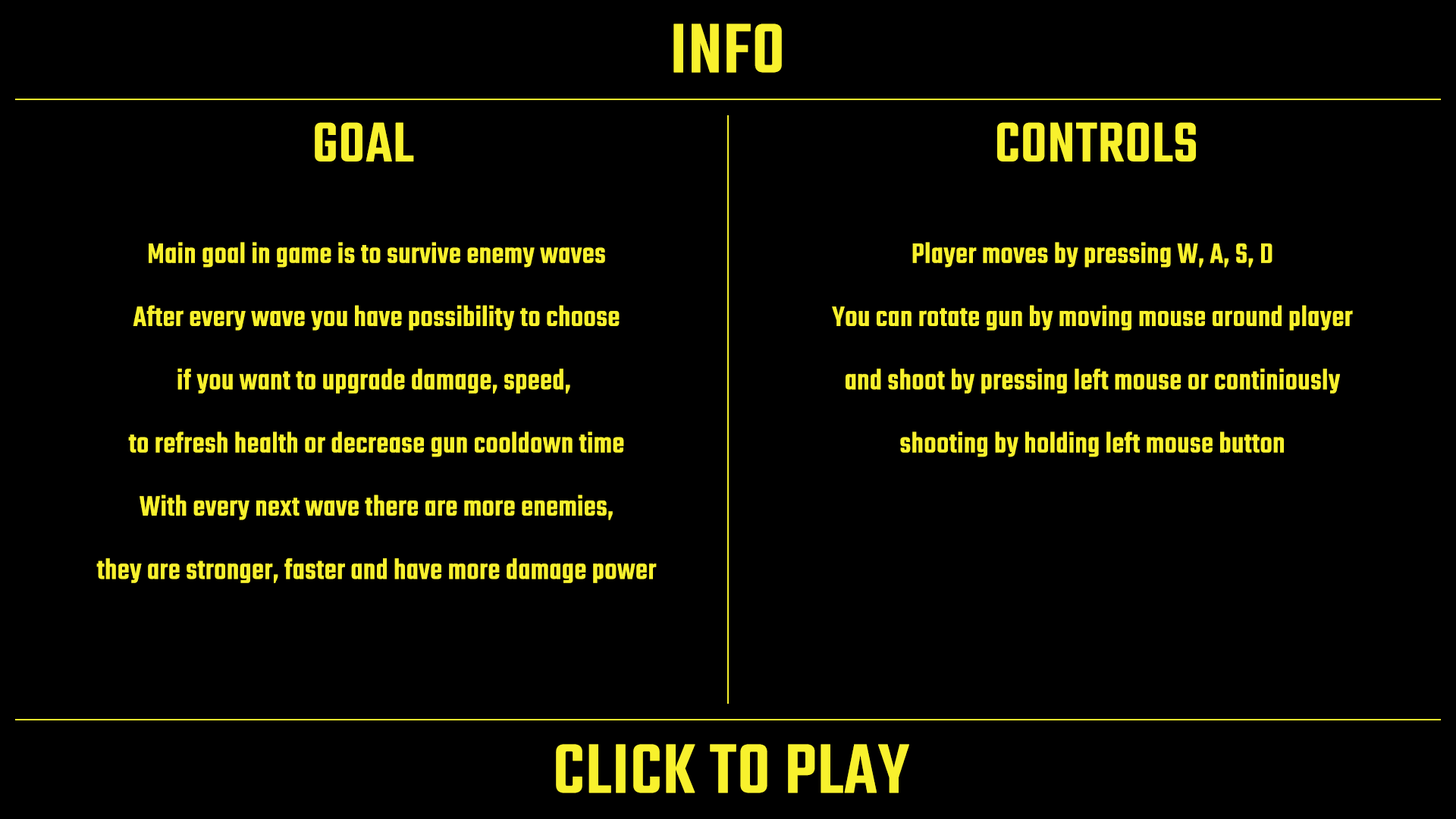
<style>
.page{position:relative;width:1456px;height:819px;background:#000000}
.page>*{position:absolute;margin:0}
.t1{font:75.8px "TekoRegular";letter-spacing:-0.01em;color:#f8f12d;font-weight:bold}
.t2{font:60.7px "TekoRegular";letter-spacing:-0.01em;color:#f8f12d;font-weight:bold}
.t3{font:30.3px/63.2px "TekoRegular";letter-spacing:-0.01em;color:#f8f12d;font-weight:bold}
</style>
<div class="page">
<p class="t1" style="left:673px;top:24px;width:109px;height:49px">INFO</p>
<p class="t2" style="left:315px;top:122px;width:99px;height:40px">GOAL</p>
<p class="t2" style="left:997px;top:122px;width:199px;height:40px">CONTROLS</p>
<p class="t3" style="left:96px;top:242px;width:561px;height:341px;text-align:center">Main goal in game is to survive enemy waves<br>After every wave you have possibility to choose<br>if you want to upgrade damage, speed, <br>to refresh health or decrease gun cooldown time<br>With every next wave there are more enemies,<br>they are stronger, faster and have more damage power</p>
<p class="t3" style="left:832px;top:242px;width:521px;height:215px;text-align:center">Player moves by pressing W, A, S, D<br>You can rotate gun by moving mouse around player<br>and shoot by pressing left mouse or continiously<br>shooting by holding left mouse button</p>
<p class="t1" style="left:556px;top:744px;width:353px;height:49px">CLICK TO PLAY</p>
</div>
